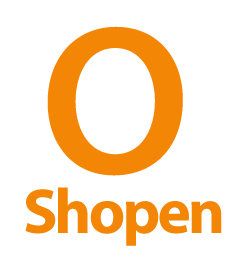
<style>
.page{position:relative;width:244px;height:270px;background:#ffffff}
.page>*{position:absolute;margin:0}
.t1{font:213.3px "MyriadPro-Semibold";letter-spacing:-0.05em;color:#f38605}
.t2{font:64px "MyriadPro-Bold";letter-spacing:-0.05em;color:#f38605}
</style>
<div class="page">
<p class="t1" style="left:47px;top:26px;width:136px;height:150px">O</p>
<p class="t2" style="left:25px;top:187px;width:197px;height:59px">Shopen</p>
</div>
